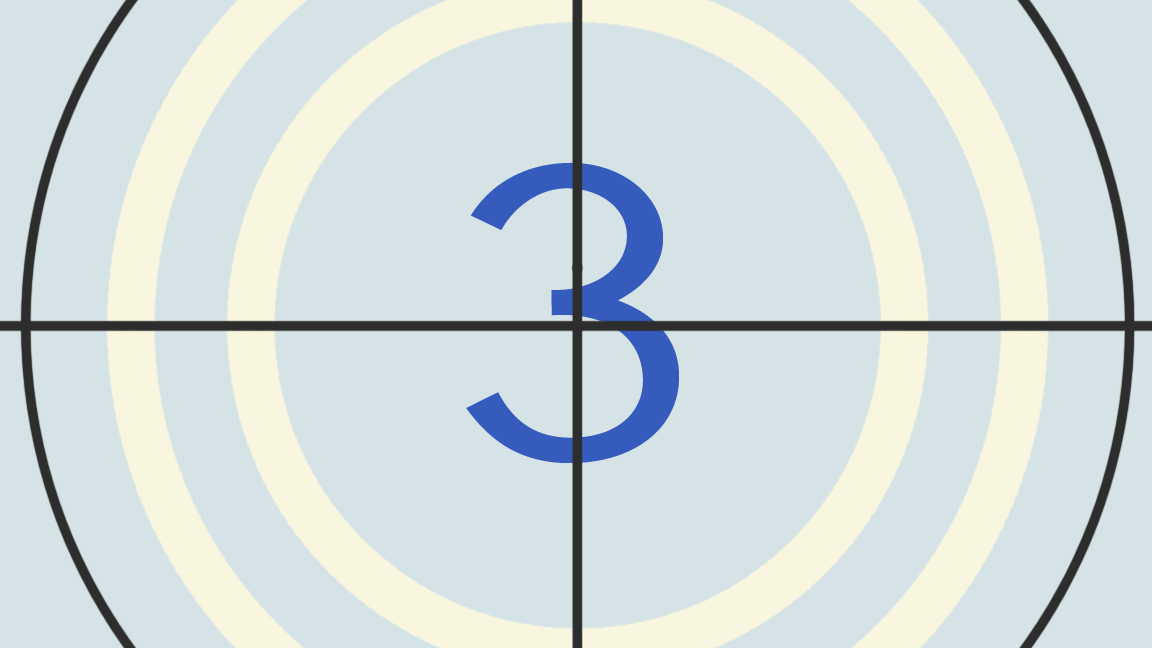
<style>
.page{position:relative;width:1152px;height:648px;background:#d6e3e6}
.page>*{position:absolute;margin:0}
.t1{font:400px "LetterGothicStd-Bold";letter-spacing:0.01em;color:#355bbc;scale:1.2 1}
</style>
<div class="page">
<p class="t1" style="left:466px;top:162px;width:213px;height:301px">3</p>
</div>
